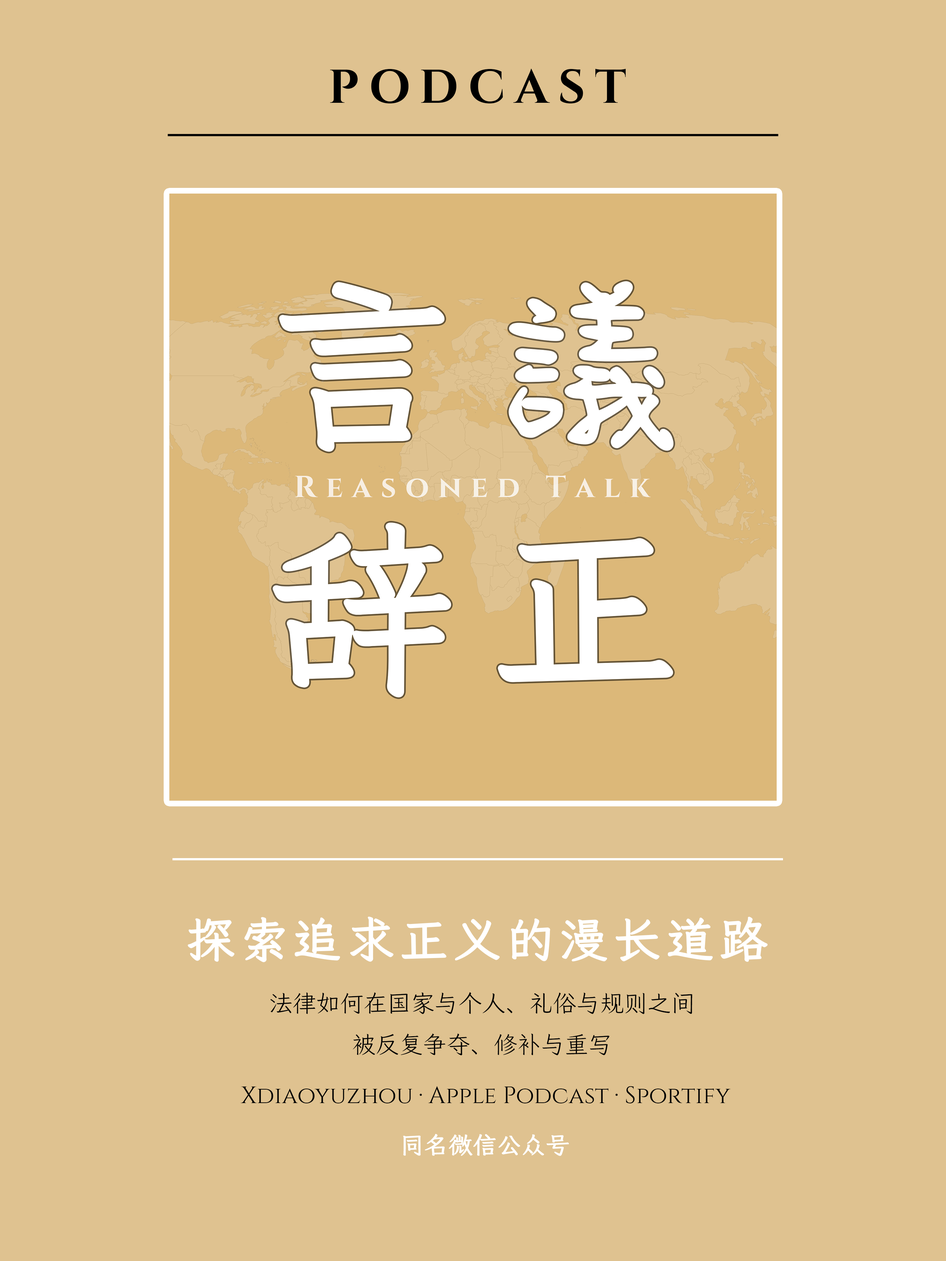
<style>
.page{position:relative;width:946px;height:1261px;background:#dfc290}
.page>*{position:absolute;margin:0}
.t1{font:47.3px "CinzelRoman-Bold";letter-spacing:0.2em;color:#000000}
.t2{font:47.3px "LXGWWenKai-Regular";letter-spacing:0.1em;color:#ffffff;font-weight:bold}
.t3{font:23.6px "LXGWWenKai-Light";color:#010101}
.t4{font:23.6px "Cinzel-Regular";color:#000000;font-weight:bold}
.t5{font:23.6px "Iansui-Regular";color:#ffffff;font-weight:bold}
</style>
<div class="page">
<p class="t1" style="left:330px;top:69px;width:296px;height:35px">PODCAST</p>
<p class="t2" style="left:188px;top:916px;width:580px;height:46px">探索追求正义的漫长道路</p>
<p class="t3" style="left:270px;top:992px;width:422px;height:63px;text-align:center">法律如何在国家与个人、礼俗与规则之间<br>被反复争夺、修补与重写</p>
<p class="t4" style="left:241px;top:1086px;width:489px;height:17px">Xdiaoyuzhou · Apple Podcast · Sportify</p>
<p class="t5" style="left:403px;top:1134px;width:166px;height:22px">同名微信公众号</p>
</div>
